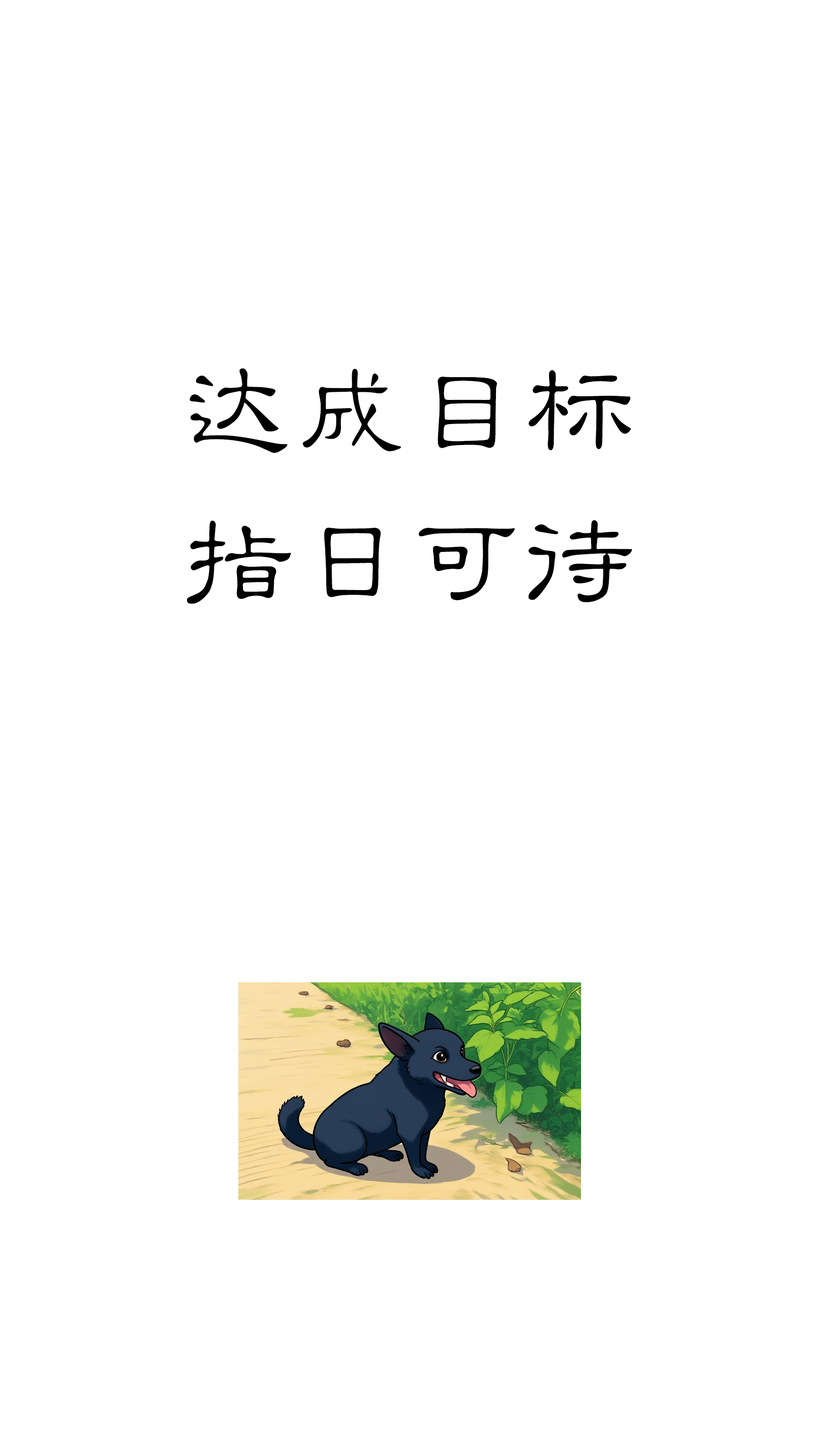
<style>
.page{position:relative;width:819px;height:1456px;background:#ffffff}
.page>*{position:absolute;margin:0}
.t1{font:113.7px/151.7px "HYf2gj";color:#000000}
</style>
<div class="page">
<p class="t1" style="left:187px;top:368px;width:445px;height:236px;text-align:center">达成目标<br>指日可待</p>
</div>
